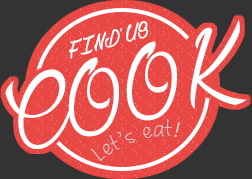
<style>
.page{position:relative;width:252px;height:179px;background:#e84743}
.page>*{position:absolute;margin:0}
.t1{font:101.9px "Chardons";letter-spacing:0.015em;color:#ffffff;text-transform:uppercase}
.t2{font:21.8px "Chardons";letter-spacing:0.015em;color:#ffffff;text-transform:uppercase;font-weight:bold}
.t3{font:21.1px "MRFquirkyauthentichandfont-Medium";letter-spacing:0.05em;color:#d2cfcf}
.t4{font:21.2px "MicrosoftNewTaiLue";letter-spacing:0.05em;color:#d2cfcf}
</style>
<div class="page">
<p class="t1" style="left:5px;top:19px;width:242px;height:130px;rotate:-15deg">Cook</p>
<p class="t2" style="left:69px;top:21px;width:79px;height:38px;rotate:-15deg">Find’us</p>
<p class="t3" style="left:91px;top:119px;width:81px;height:43px;rotate:-16deg">Let’s eat !</p>
<p class="t4" style="left:174px;top:122px;width:6px;height:15px;rotate:14deg">!</p>
</div>
